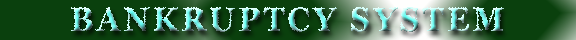
<style>
.page{position:relative;width:576px;height:40px;background:#0a400d}
.page>*{position:absolute;margin:0}
.t1{font:33.5px "Georgia-Bold";letter-spacing:0.1em;scale:0.93 1}
</style>
<div class="page">
<p class="t1" style="left:71px;top:7px;width:433px;height:25px">BANKRUPTCY SYSTEM</p>
</div>
